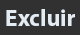
<style>
.page{position:relative;width:80px;height:35px;background:#313131}
.page>*{position:absolute;margin:0}
.t1{font:23.5px "MyriadPro-Bold";color:#e3ecf3}
</style>
<div class="page">
<p class="t1" style="left:6px;top:9px;width:69px;height:17px">Excluir</p>
</div>
